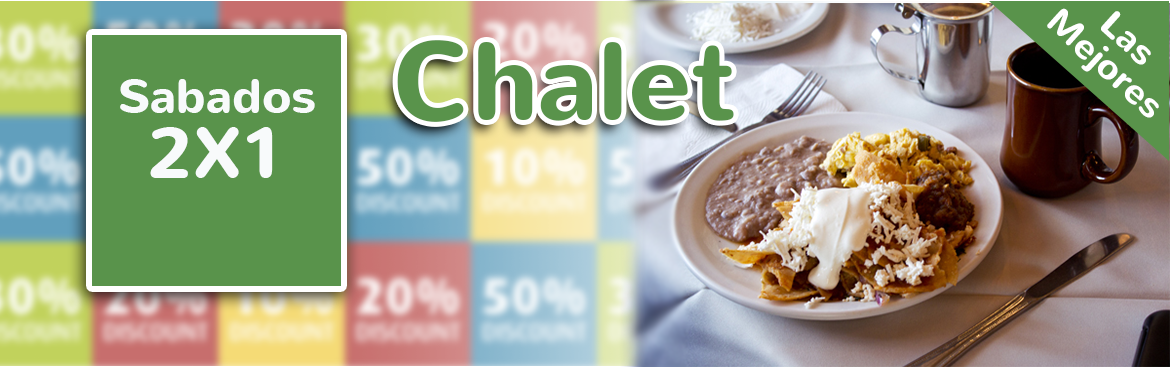
<style>
.page{position:relative;width:1170px;height:367px}
.page>*{position:absolute;margin:0}
.t1{font:36px/34px "Nunito-Bold";color:#ffffff}
.t2{font:110px "Nunito-Bold";color:#59934b}
.t3{font:48px/65px "Nunito-Bold";color:#f8fafb}
.t4{font:72px/65px "Nunito-Bold";color:#f8fafb}
</style>
<div class="page">
<p class="t1" style="left:1047px;top:8px;width:112px;height:110px;text-align:center;rotate:42deg">Las <br>Mejores</p>
<p class="t2" style="left:397px;top:40px;width:337px;height:82px">Chalet</p>
<p class="t3" style="left:120px;top:79px;width:195px;height:99px;text-align:center">Sabados<br><span class="t4">2X1</span></p>
</div>
